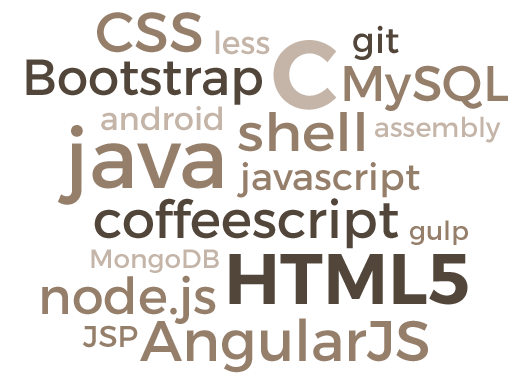
<style>
.page{position:relative;width:520px;height:386px;background:#ffffff}
.page>*{position:absolute;margin:0}
.t1{font:56.3px "Montserrat-Regular";color:#957e6a}
.t2{font:31.8px "Montserrat-Regular";color:#c4b5a8}
.t3{font:36.3px "Montserrat-Regular";color:#52453a}
.t4{font:97.9px "Montserrat-SemiBold";color:#c4b5a8}
.t5{font:50.9px "Montserrat-Regular";color:#52453a}
.t6{font:50px "Montserrat-Regular";color:#957e6a}
.t7{font:52.7px "Montserrat-Regular";color:#957e6a;scale:1.08 1}
.t8{font:83.6px "Montserrat-Regular";color:#957e6a}
.t9{font:27.2px "Montserrat-Regular";color:#c4b5a8}
.t10{font:37.2px "Montserrat-Regular";color:#957e6a}
.t11{font:52.7px "Montserrat-Regular";color:#52453a}
.t12{font:26.3px "Montserrat-Regular";color:#957e6a}
.t13{font:26.3px "Montserrat-Regular";color:#c4b5a8}
.t14{font:71.4px "Montserrat-SemiBold";color:#52453a}
.t15{font:50.9px "Montserrat-Regular";color:#957e6a}
.t16{font:57.2px "Montserrat-Regular";color:#957e6a}
.t17{font:30px "Montserrat-Regular";color:#957e6a}
</style>
<div class="page">
<p class="t1" style="left:97px;top:12px;width:105px;height:41px">CSS</p>
<p class="t2" style="left:215px;top:30px;width:55px;height:25px">less</p>
<p class="t3" style="left:353px;top:25px;width:46px;height:35px">git</p>
<p class="t4" style="left:273px;top:40px;width:64px;height:70px">C</p>
<p class="t5" style="left:26px;top:59px;width:236px;height:46px">Bootstrap</p>
<p class="t6" style="left:344px;top:65px;width:164px;height:46px">MySQL</p>
<p class="t2" style="left:101px;top:106px;width:121px;height:25px">android</p>
<p class="t7" style="left:238px;top:112px;width:126px;height:40px">shell</p>
<p class="t8" style="left:58px;top:125px;width:164px;height:80px">java</p>
<p class="t9" style="left:375px;top:116px;width:126px;height:27px">assembly</p>
<p class="t10" style="left:236px;top:162px;width:184px;height:36px">javascript</p>
<p class="t11" style="left:94px;top:198px;width:305px;height:51px">coffeescript</p>
<p class="t12" style="left:410px;top:220px;width:58px;height:25px">gulp</p>
<p class="t13" style="left:91px;top:249px;width:128px;height:24px">MongoDB</p>
<p class="t14" style="left:229px;top:254px;width:239px;height:51px">HTML5</p>
<p class="t15" style="left:42px;top:275px;width:174px;height:49px">node.js</p>
<p class="t16" style="left:140px;top:318px;width:288px;height:55px">AngularJS</p>
<p class="t17" style="left:83px;top:325px;width:55px;height:23px">JSP</p>
</div>
